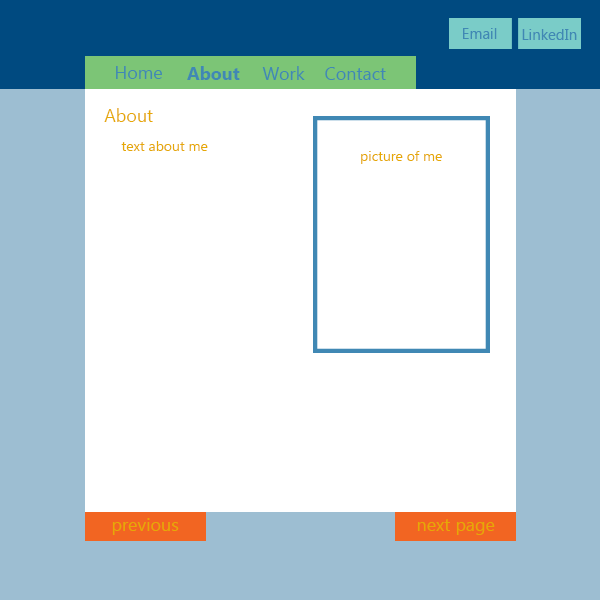
<style>
.page{position:relative;width:600px;height:600px;background:#ffffff}
.page>*{position:absolute;margin:0}
.t1{font:15.1px "Gadugi";color:#4088b4}
.t2{font:18px "Gadugi";color:#4088b4}
.t3{font:18px "Gadugi-Bold";color:#4088b4}
.t4{font:18px "Gadugi";color:#e6a906}
.t5{font:14px "Gadugi";color:#e6a906}
</style>
<div class="page">
<p class="t1" style="left:463px;top:28px;width:34px;height:11px">Email</p>
<p class="t1" style="left:522px;top:29px;width:55px;height:11px">LinkedIn</p>
<p class="t2" style="left:116px;top:66px;width:46px;height:13px">Home</p>
<p class="t3" style="left:187px;top:66px;width:53px;height:14px">About</p>
<p class="t2" style="left:262px;top:66px;width:43px;height:14px">Work</p>
<p class="t2" style="left:325px;top:67px;width:61px;height:13px">Contact</p>
<p class="t4" style="left:104px;top:108px;width:49px;height:14px">About</p>
<p class="t5" style="left:121px;top:141px;width:87px;height:10px">text about me</p>
<p class="t5" style="left:361px;top:151px;width:81px;height:13px">picture of me</p>
<p class="t4" style="left:112px;top:518px;width:67px;height:17px">previous</p>
<p class="t4" style="left:417px;top:519px;width:78px;height:16px">next page</p>
</div>
